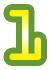
<style>
.page{position:relative;width:50px;height:70px;background:#ffffff}
.page>*{position:absolute;margin:0}
.t1{font:64px "OCRAStd"}
</style>
<div class="page">
<p class="t1" style="left:9px;top:10px;width:32px;height:50px">1</p>
</div>
